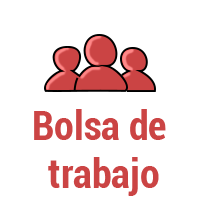
<style>
.page{position:relative;width:200px;height:200px;background:#ffffff}
.page>*{position:absolute;margin:0}
.t1{font:40px "Roboto-BoldCondensed";color:#cb4444}
</style>
<div class="page">
<p class="t1" style="left:34px;top:109px;width:132px;height:87px;text-align:center">Bolsa de <br>trabajo</p>
</div>
